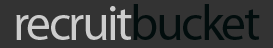
<style>
.page{position:relative;width:273px;height:48px;background:#333333}
.page>*{position:absolute;margin:0}
.t1{font:49.7px "MyriadPro-Regular";letter-spacing:-0.05em;color:#cdcdcd}
.t2{font:49.7px "MyriadPro-Regular";letter-spacing:-0.05em;color:#020d0d}
</style>
<div class="page">
<p class="t1" style="left:16px;top:4px;width:244px;height:36px">recruit<span class="t2">bucket</span></p>
</div>
